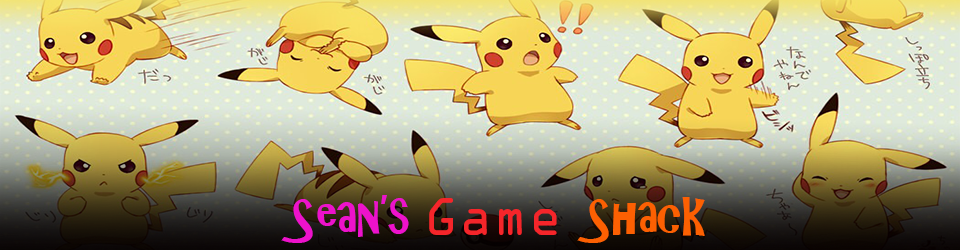
<style>
.page{position:relative;width:960px;height:250px}
.page>*{position:absolute;margin:0}
.t1{font:48px "ARCHRISTY";color:#ed12cb}
.t2{font:48px "OCRAStd";color:#f5252a}
.t3{font:48px "ARCHRISTY";color:#fc6002}
</style>
<div class="page">
<p class="t1" style="left:281px;top:195px;width:424px;height:48px">Sean’s <span class="t2">Game </span><span class="t3">Shack</span></p>
</div>
